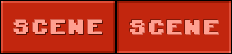
<style>
.page{position:relative;width:232px;height:54px;background:#c2260e}
.page>*{position:absolute;margin:0}
.t1{font:18px "KongtextRegular";letter-spacing:0.022em;color:#ffa091}
</style>
<div class="page">
<p class="t1" style="left:14px;top:20px;width:88px;height:14px">SCENE</p>
<p class="t1" style="left:130px;top:20px;width:88px;height:14px">SCENE</p>
</div>
